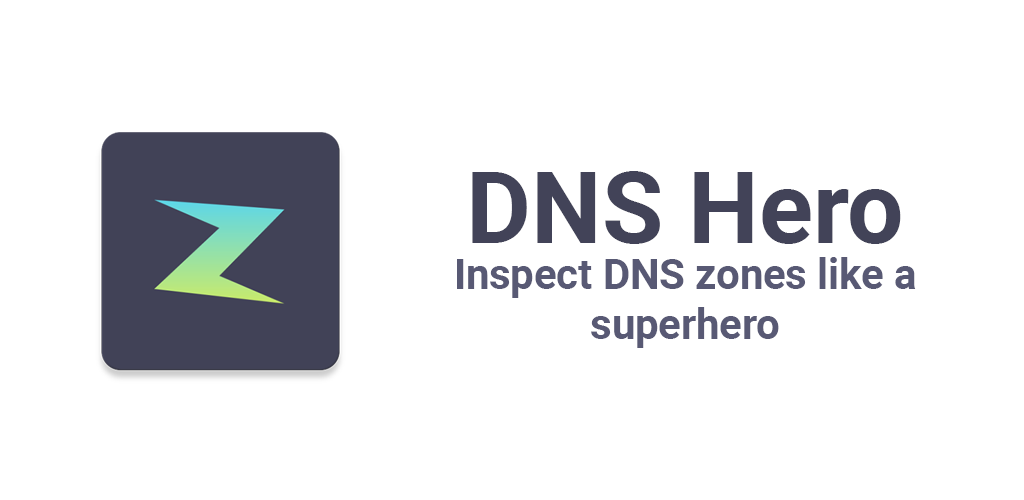
<style>
.page{position:relative;width:1024px;height:500px;background:#ffffff}
.page>*{position:absolute;margin:0}
.t1{font:100px "Roboto-Bold";color:#424358}
.t2{font:41.7px "Roboto-Bold";color:#585974}
</style>
<div class="page">
<p class="t1" style="left:472px;top:171px;width:429px;height:73px">DNS Hero</p>
<p class="t2" style="left:457px;top:257px;width:459px;height:91px;text-align:center">Inspect DNS zones like a superhero</p>
</div>
